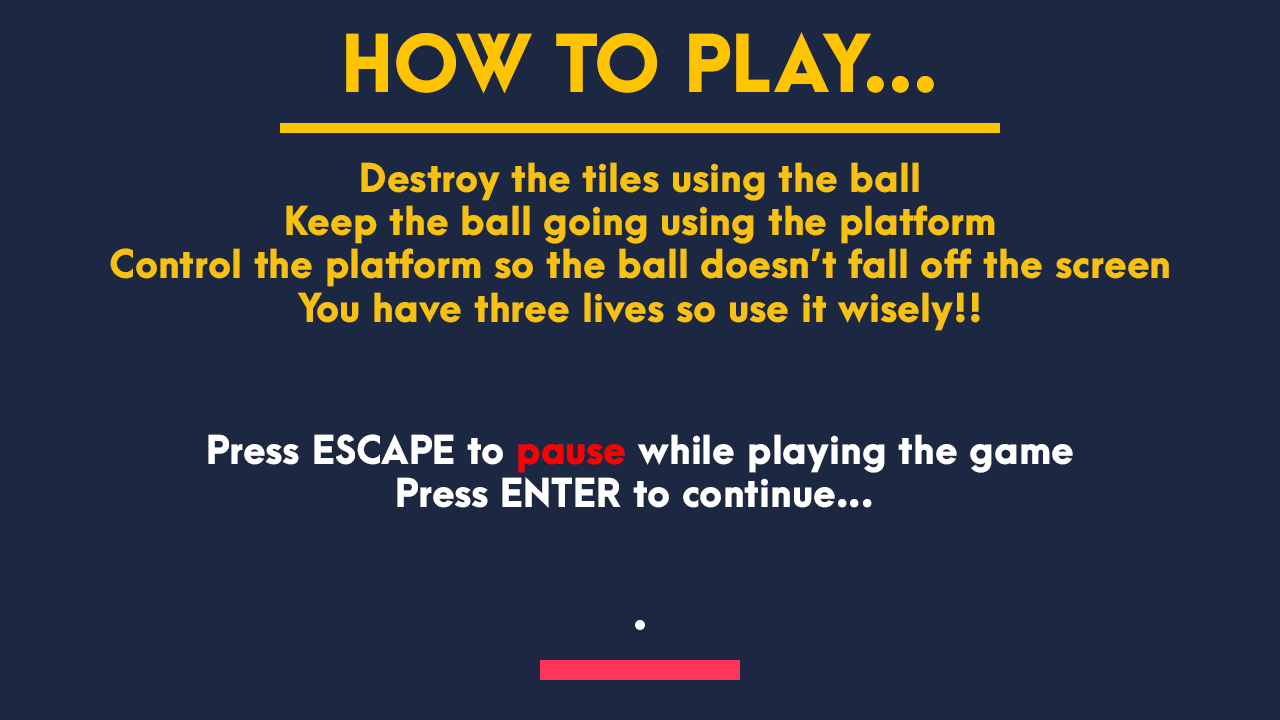
<style>
.page{position:relative;width:1280px;height:720px;background:#1c2841}
.page>*{position:absolute;margin:0}
.t1{font:72px "ArcaMajora3-Heavy";color:#ffc400}
.t2{font:36px "ArcaMajora3-Heavy";color:#f6c111}
.t3{font:36px "ArcaMajora3-Heavy";color:#ffffff}
.t4{font:36px "ArcaMajora3-Heavy";color:#ff0000}
</style>
<div class="page">
<p class="t1" style="left:346px;top:32px;width:588px;height:62px">HOW TO PLAY...</p>
<p class="t2" style="left:110px;top:162px;width:1059px;height:169px;text-align:center">Destroy the tiles using the ball<br>Keep the ball going using the platform<br>Control the platform so the ball doesn’t fall off the screen<br>You have three lives so use it wisely!!</p>
<p class="t3" style="left:208px;top:434px;width:865px;height:74px;text-align:center">Press ESCAPE to <span class="t4">pause</span> while playing the game<br>Press ENTER to continue...</p>
</div>
